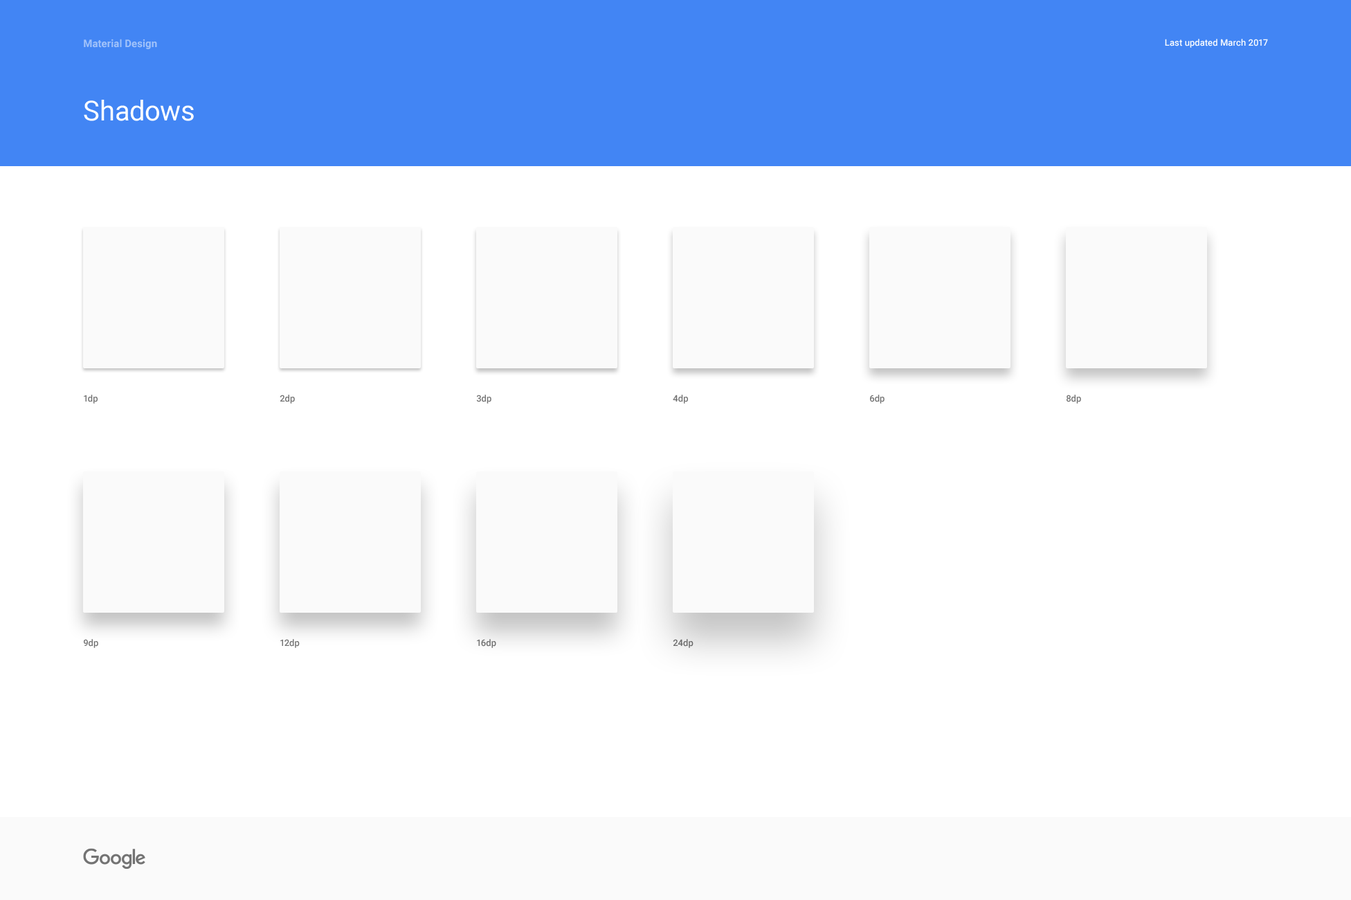
<style>
.page{position:relative;width:1351px;height:900px;background:#ffffff}
.page>*{position:absolute;margin:0}
.t1{font:10.4px "Roboto-Bold";letter-spacing:0.005em;color:#a1c2fa}
.t2{font:9px "Roboto-Medium";letter-spacing:0.005em;color:#ffffff}
.t3{font:27.7px "Roboto-Regular";letter-spacing:0.005em;color:#ffffff}
.t4{font:9px "Roboto-Medium";letter-spacing:0.005em;color:#737373}
.t5{font:9px "Roboto-Medium";letter-spacing:0.005em;color:#6f6f6f}
.t6{font:9px "Roboto-Medium";letter-spacing:0.005em;color:#6b6b6b}
</style>
<div class="page">
<p class="t1" style="left:84px;top:39px;width:73px;height:10px">Material Design</p>
<p class="t2" style="left:1165px;top:39px;width:103px;height:9px">Last updated March 2017</p>
<p class="t3" style="left:84px;top:100px;width:110px;height:21px">Shadows</p>
<p class="t4" style="left:84px;top:395px;width:14px;height:9px">1dp</p>
<p class="t4" style="left:280px;top:395px;width:15px;height:9px">2dp</p>
<p class="t4" style="left:476px;top:395px;width:16px;height:9px">3dp</p>
<p class="t4" style="left:673px;top:395px;width:15px;height:9px">4dp</p>
<p class="t4" style="left:870px;top:395px;width:15px;height:9px">6dp</p>
<p class="t4" style="left:1067px;top:395px;width:14px;height:9px">8dp</p>
<p class="t4" style="left:84px;top:639px;width:14px;height:9px">9dp</p>
<p class="t4" style="left:280px;top:639px;width:20px;height:9px">12dp</p>
<p class="t5" style="left:477px;top:639px;width:19px;height:9px">16dp</p>
<p class="t6" style="left:673px;top:639px;width:21px;height:9px">24dp</p>
</div>
